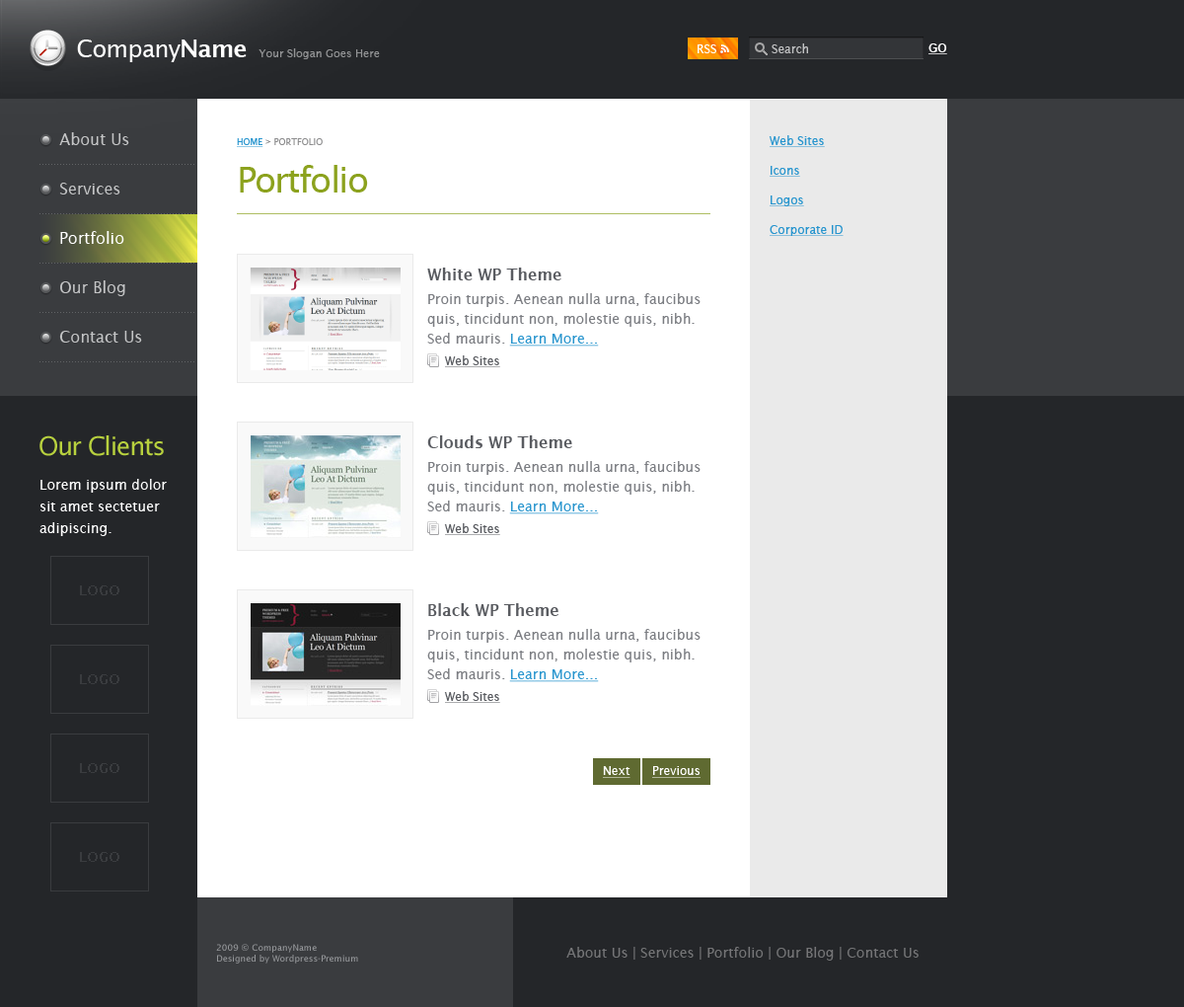
<style>
.page{position:relative;width:1184px;height:1007px;background:#242629}
.page>*{position:absolute;margin:0}
.t1{font:23.7px "LucidaSans";letter-spacing:-0.025em;color:#ffffff}
.t2{font:23.7px "LucidaSans-Demi";letter-spacing:-0.025em;color:#ffffff}
.t3{font:10.9px "LucidaSans";color:#929395}
.t4{font:11.8px "LucidaSans";color:#ffffff}
.t5{font:11.8px "LucidaSans";color:#c2c3c4}
.t6{font:15.8px/49.4px "LucidaSans";color:#c4c5c6}
.t7{font:11.8px/29.6px "LucidaSans";color:#2895ce;text-decoration:underline}
.t8{font:8.9px "LucidaSans";color:#8d8d8e;text-transform:uppercase}
.t9{font:8.9px "LucidaSans";color:#2895ce;text-transform:uppercase;text-decoration:underline}
.t10{font:35.5px "LucidaSans";letter-spacing:-0.05em;color:#8ca21e}
.t11{font:15.8px "LucidaSans";color:#fefefe}
.t12{font:13.8px/19.7px "LucidaSans";color:#7b7d82}
.t13{font:15.8px/17.8px "LucidaSans-Demi";color:#595b60}
.t14{font:15.8px/23.7px "LucidaSans-Demi";color:#595b60}
.t15{font:13.8px/23.7px "LucidaSans";color:#7b7d82}
.t16{font:13.8px/19.7px "LucidaSans";color:#2895ce;text-decoration:underline}
.t17{font:11.8px "LucidaSans";color:#595b60;text-decoration:underline}
.t18{font:25.7px "LucidaSans";letter-spacing:-0.05em;color:#b8d13e}
.t19{font:13.8px/21.7px "LucidaSans";color:#ffffff}
.t20{font:11.8px "LucidaSans";color:#ffffff;text-decoration:underline}
.t21{font:8.9px "LucidaSans";color:#979798}
.t22{font:13.8px "LucidaSans";color:#757577}
</style>
<div class="page">
<p class="t1" style="left:77px;top:39px;width:170px;height:23px">Company<span class="t2">Name</span></p>
<p class="t3" style="left:259px;top:48px;width:121px;height:11px">Your Slogan Goes Here</p>
<p class="t4" style="left:698px;top:44px;width:19px;height:9px">RSS</p>
<p class="t5" style="left:772px;top:43px;width:36px;height:10px">Search</p>
<p class="t6" style="left:59px;top:132px;width:83px;height:210px">About Us<br>Services<br><br>Our Blog<br>Contact Us</p>
<p class="t7" style="left:769px;top:135px;width:75px;height:101px">Web Sites<br>Icons<br>Logos<br>Corporate ID</p>
<p class="t8" style="left:237px;top:138px;width:86px;height:9px"><span class="t9">Home</span> &gt; Portfolio</p>
<p class="t10" style="left:240px;top:165px;width:128px;height:27px">Portfolio</p>
<p class="t11" style="left:60px;top:231px;width:64px;height:13px">Portfolio</p>
<p class="t12" style="left:427px;top:267px;width:274px;height:79px"><span class="t13">White WP The</span><span class="t14">me<br></span><span class="t15">Proin turpis. Aene</span>an nulla urna, faucibus quis, tincidunt non, molestie quis, nibh. Sed mauris. <span class="t16">Learn More...</span></p>
<p class="t17" style="left:444px;top:355px;width:56px;height:12px">Web Sites</p>
<p class="t18" style="left:39px;top:435px;width:125px;height:21px">Our Clients</p>
<p class="t12" style="left:427px;top:435px;width:274px;height:79px"><span class="t13">Clouds WP The</span><span class="t14">me<br></span><span class="t15">Proin turpis. Aene</span>an nulla urna, faucibus quis, tincidunt non, molestie quis, nibh. Sed mauris. <span class="t16">Learn More...</span></p>
<p class="t19" style="left:39px;top:479px;width:128px;height:57px">Lorem ipsum dolor sit amet sectetuer adipiscing.</p>
<p class="t17" style="left:444px;top:523px;width:56px;height:12px">Web Sites</p>
<p class="t12" style="left:427px;top:603px;width:274px;height:79px"><span class="t13">Black WP The</span><span class="t14">me<br></span><span class="t15">Proin turpis. Aene</span>an nulla urna, faucibus quis, tincidunt non, molestie quis, nibh. Sed mauris. <span class="t16">Learn More...</span></p>
<p class="t17" style="left:444px;top:691px;width:56px;height:12px">Web Sites</p>
<p class="t20" style="left:603px;top:766px;width:28px;height:12px">Next</p>
<p class="t20" style="left:652px;top:766px;width:49px;height:12px">Previous</p>
<p class="t21" style="left:216px;top:944px;width:142px;height:19px">2009 © CompanyName<br>Designed by Wordpress-Premium</p>
<p class="t22" style="left:567px;top:947px;width:352px;height:13px">About Us | Services | Portfolio | Our Blog | Contact Us</p>
</div>
